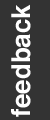
<style>
.page{position:relative;width:50px;height:120px;background:#333333}
.page>*{position:absolute;margin:0}
.t1{font:25.9px "Helvetica-Bold";color:#ffffff}
</style>
<div class="page">
<p class="t1" style="left:11px;top:4px;width:20px;height:113px;rotate:-90deg">feedback</p>
</div>
